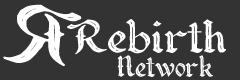
<style>
.page{position:relative;width:240px;height:80px;background:#333333}
.page>*{position:absolute;margin:0}
.t1{font:53.3px "Forgoth";color:#ffffff;scale:1.15 1}
.t2{font:34.2px "Forgoth";color:#ffffff}
</style>
<div class="page">
<p class="t1" style="left:67px;top:19px;width:159px;height:36px">Rebirth</p>
<p class="t2" style="left:117px;top:55px;width:96px;height:22px">Network</p>
</div>
